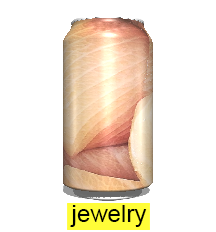
<style>
.page{position:relative;width:216px;height:232px;background:#ffffff}
.page>*{position:absolute;margin:0}
.t1{font:24px "ArialMT";color:#000000}
</style>
<div class="page">
<p class="t1" style="left:70px;top:205px;width:77px;height:22px">jewelry</p>
</div>
